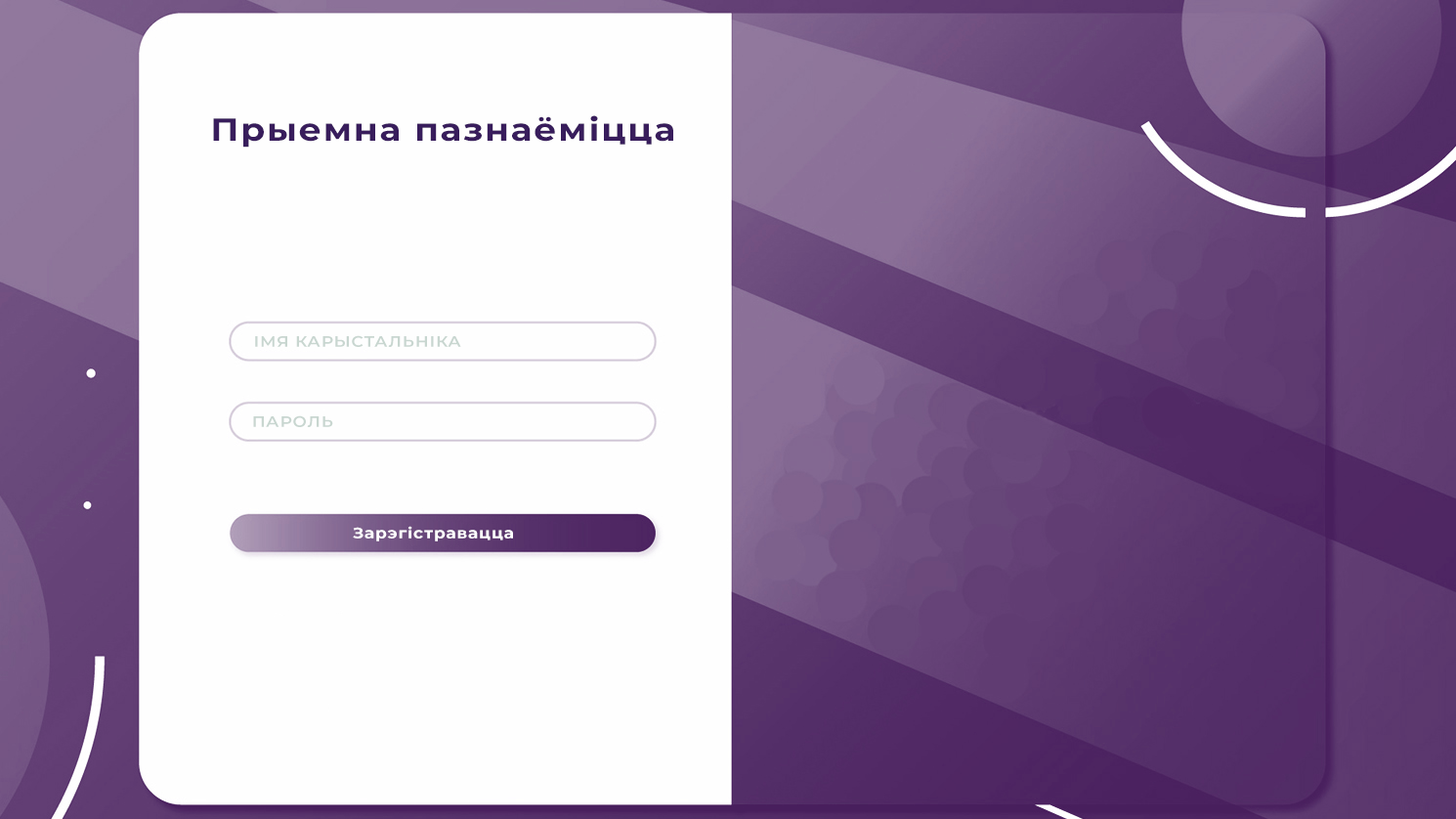
<style>
.page{position:relative;width:1456px;height:819px;background:#fefefe}
.page>*{position:absolute;margin:0}
.t1{font:31.7px "Montserrat-Bold";letter-spacing:0.05em;color:#381d5c;scale:1.11 1}
.t2{font:15px "Montserrat-SemiBold";letter-spacing:0.05em;color:#c8d6d0;scale:1.11 1}
.t3{font:15px "Montserrat-Bold";letter-spacing:0.05em;color:#ffffff;scale:1.11 1}
</style>
<div class="page">
<p class="t1" style="left:213px;top:115px;width:460px;height:33px">Прыемна пазнаёміцца</p>
<p class="t2" style="left:255px;top:335px;width:206px;height:12px">ІМЯ КАРЫСТАЛЬНІКА</p>
<p class="t2" style="left:253px;top:415px;width:80px;height:12px">ПАРОЛЬ</p>
<p class="t3" style="left:353px;top:526px;width:160px;height:15px">Зарэгістравацца</p>
</div>
